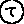
<style>
.page{position:relative;width:24px;height:24px;background:#ffffff}
.page>*{position:absolute;margin:0}
.t1{font:14px "xm|bv";color:#000000}
</style>
<div class="page">
<p class="t1" style="left:5px;top:7px;width:11px;height:10px">て</p>
</div>
